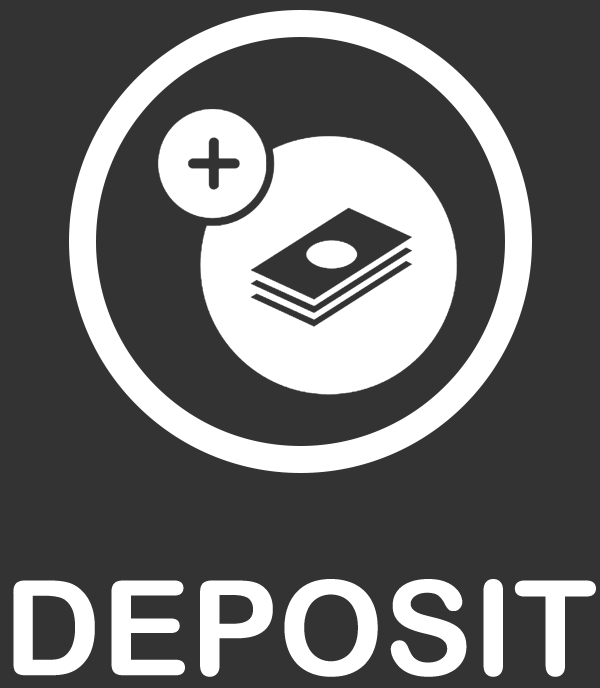
<style>
.page{position:relative;width:600px;height:688px;background:#333333}
.page>*{position:absolute;margin:0}
.t1{font:132.1px "ArialRoundedMTBold";color:#ffffff}
</style>
<div class="page">
<p class="t1" style="left:13px;top:579px;width:583px;height:98px">DEPOSIT</p>
</div>
